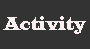
<style>
.page{position:relative;width:90px;height:49px;background:#333333}
.page>*{position:absolute;margin:0}
.t1{font:18.7px "LatinWide";color:#f8efef;scale:0.63 1}
</style>
<div class="page">
<p class="t1" style="left:3px;top:16px;width:83px;height:18px">Activity</p>
</div>
